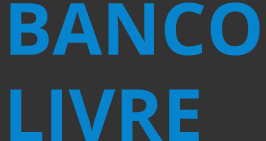
<style>
.page{position:relative;width:266px;height:141px;background:#333333}
.page>*{position:absolute;margin:0}
.t1{font:72px "OpenSans-Bold";color:#0685ce}
</style>
<div class="page">
<p class="t1" style="left:10px;top:2px;width:250px;height:139px">BANCO <br>LIVRE</p>
</div>
